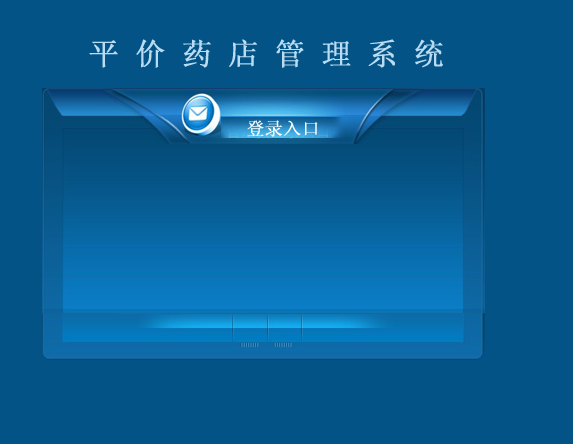
<style>
.page{position:relative;width:573px;height:444px;background:#035386}
.page>*{position:absolute;margin:0}
.t1{font:30px "SimSun";color:#badcf3;font-weight:bold}
.t2{font:18px "SimSun";color:#fcfefb;font-weight:bold}
</style>
<div class="page">
<p class="t1" style="left:89px;top:39px;width:354px;height:29px">平 价 药 店 管 理 系 统</p>
<p class="t2" style="left:247px;top:120px;width:71px;height:17px">登录入口</p>
</div>
